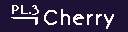
<style>
.page{position:relative;width:128px;height:32px;background:#1d1135}
.page>*{position:absolute;margin:0}
.t1{font:12px "BonvenoCF-Light";letter-spacing:0.005em;color:#ffffff;font-weight:bold}
.t2{font:18px "BonvenoCF-Light";letter-spacing:0.005em;color:#ffffff;font-weight:bold}
</style>
<div class="page">
<p class="t1" style="left:12px;top:5px;width:19px;height:9px">PL.</p>
<p class="t1" style="left:32px;top:5px;width:7px;height:10px">3</p>
<p class="t2" style="left:44px;top:9px;width:70px;height:20px">Cherry</p>
</div>
